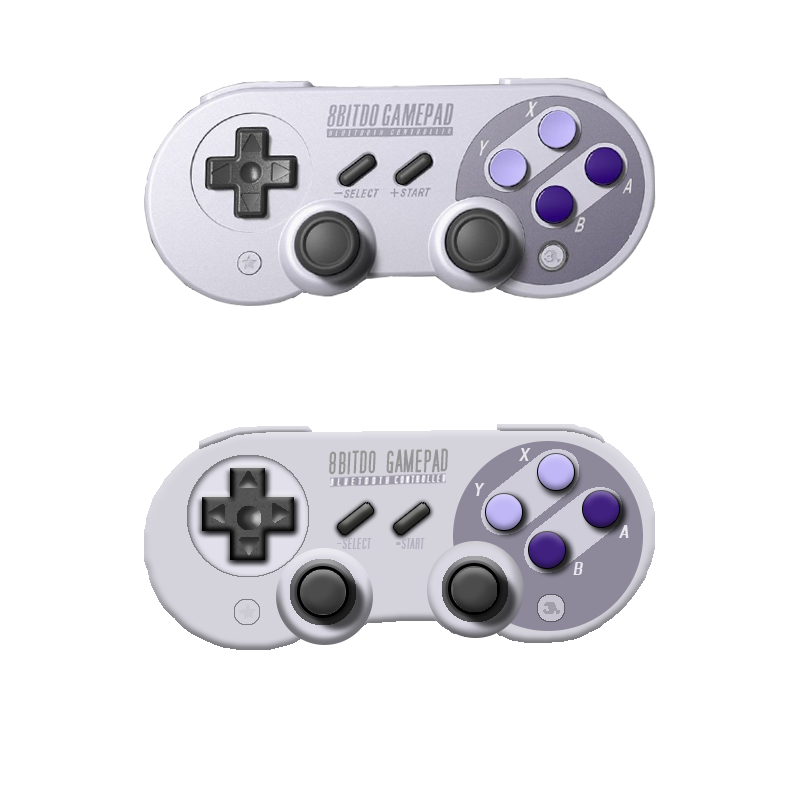
<style>
.page{position:relative;width:800px;height:800px;background:#ffffff}
.page>*{position:absolute;margin:0}
.t1{font:28.4px "SFMoviePosterBoldItalic";color:#959595;scale:0.85 1}
.t2{font:16.3px "SFMoviePosterItalic";color:#e8e7ee;scale:1.93 1}
.t3{font:14px "SFMoviePosterBoldItalic";color:#b4b2bf}
</style>
<div class="page">
<p class="t1" style="left:329px;top:448px;width:119px;height:27px;rotate:-1deg">8BITDO  GAMEPAD</p>
<p class="t2" style="left:519px;top:448px;width:12px;height:13px">X</p>
<p class="t2" style="left:475px;top:483px;width:10px;height:13px">Y</p>
<p class="t2" style="left:619px;top:525px;width:10px;height:13px">A</p>
<p class="t3" style="left:337px;top:538px;width:35px;height:11px">-SELECT</p>
<p class="t2" style="left:573px;top:562px;width:10px;height:13px">B</p>
</div>
